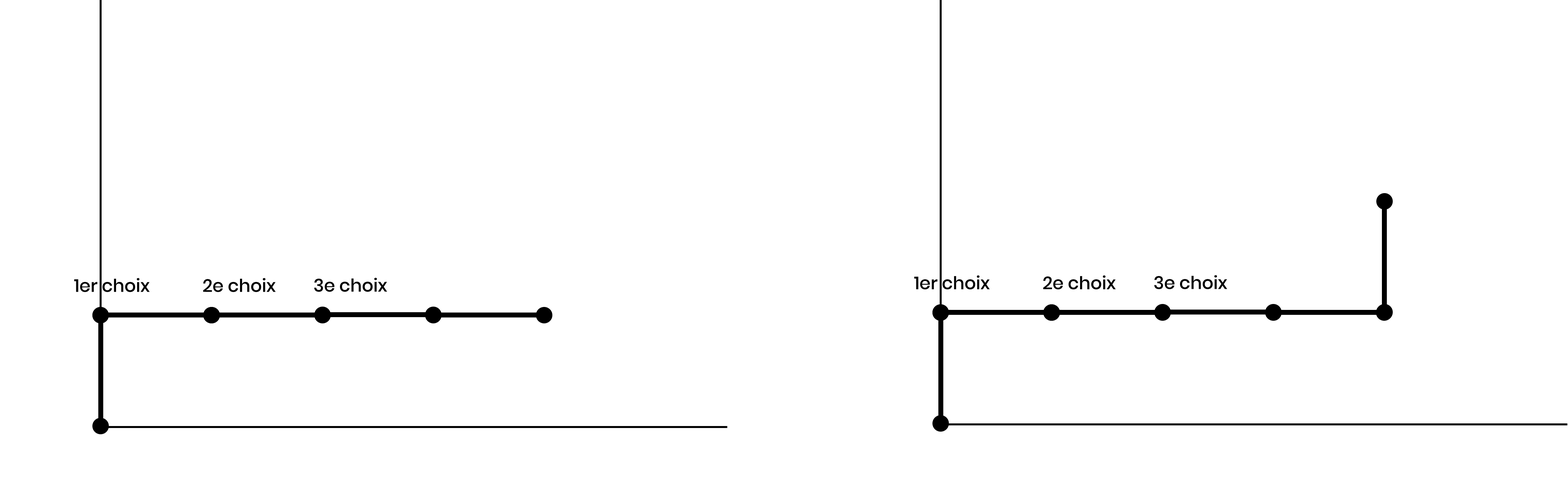
<style>
.page{position:relative;width:1568px;height:479px;background:#ffffff}
.page>*{position:absolute;margin:0}
.t1{font:17.8px "Poppins-Medium";color:#000000}
</style>
<div class="page">
<p class="t1" style="left:74px;top:278px;width:76px;height:14px">1er choix</p>
<p class="t1" style="left:203px;top:278px;width:73px;height:14px">2e choix</p>
<p class="t1" style="left:314px;top:277px;width:73px;height:15px">3e choix</p>
<p class="t1" style="left:914px;top:275px;width:76px;height:14px">1er choix</p>
<p class="t1" style="left:1043px;top:275px;width:73px;height:14px">2e choix</p>
<p class="t1" style="left:1154px;top:275px;width:73px;height:14px">3e choix</p>
</div>
